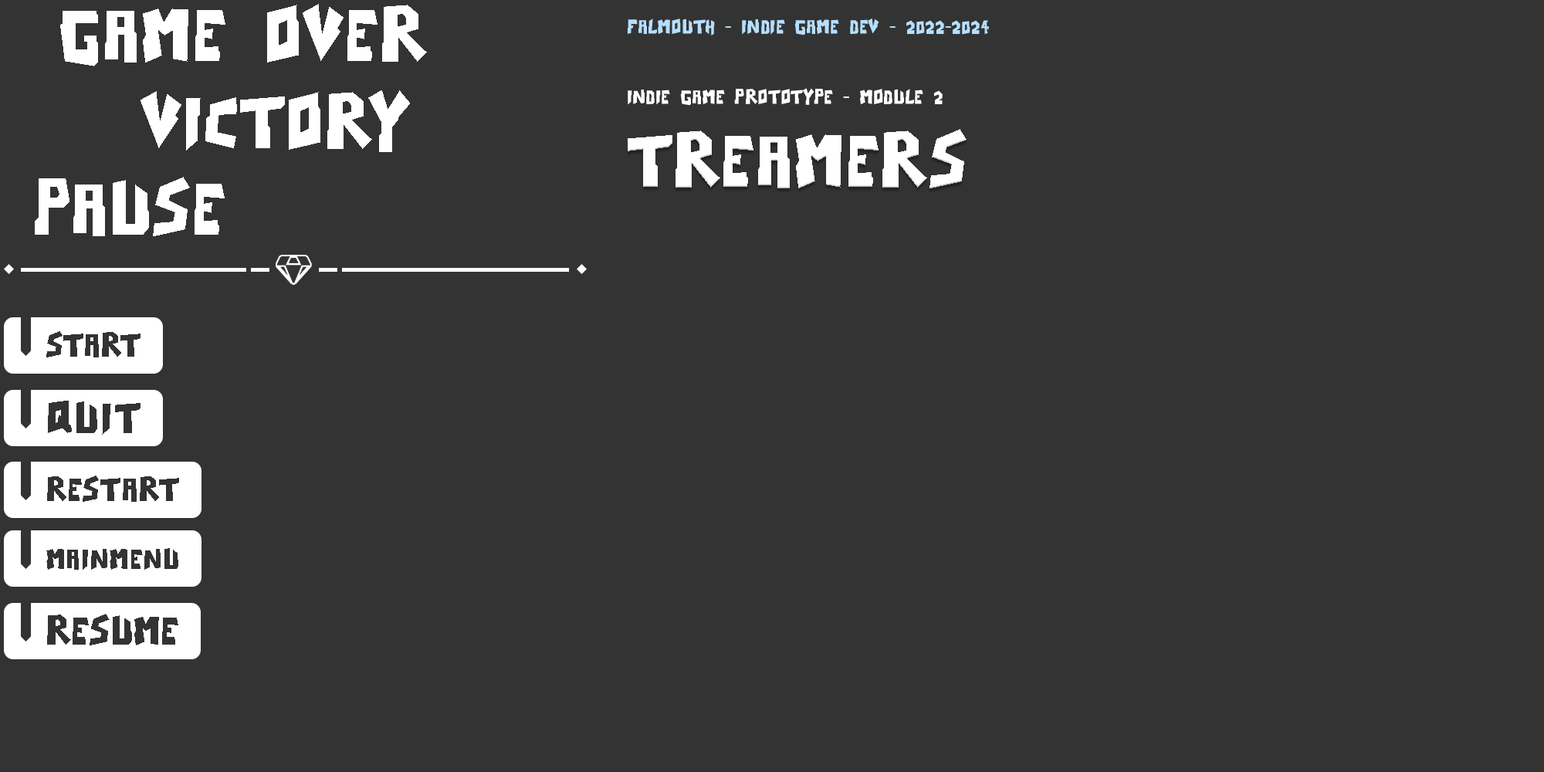
<style>
.page{position:relative;width:1544px;height:772px;background:#333333}
.page>*{position:absolute;margin:0}
.t1{font:104.2px "NineTsukiRegular";color:#ffffff}
.t2{font:27.8px "NineTsukiRegular";color:#b5dfff}
.t3{font:27.8px "NineTsukiRegular";color:#ffffff}
</style>
<div class="page">
<p class="t1" style="left:60px;top:4px;width:367px;height:62px">game over</p>
<p class="t2" style="left:628px;top:18px;width:362px;height:18px">FALMOUTH - INDIE GAME DEV - 2022-2024</p>
<p class="t3" style="left:628px;top:88px;width:315px;height:18px">INDIE GAME PROTOTYPE - Module 2</p>
<p class="t1" style="left:141px;top:90px;width:269px;height:62px">victory</p>
<p class="t1" style="left:628px;top:129px;width:339px;height:59px">treamers</p>
<p class="t1" style="left:35px;top:177px;width:190px;height:59px">pause</p>
</div>
